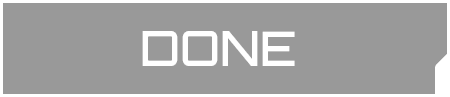
<style>
.page{position:relative;width:450px;height:97px;background:#999999}
.page>*{position:absolute;margin:0}
.t1{font:48px "Orbitron-Medium";color:#ffffff;text-transform:uppercase}
</style>
<div class="page">
<p class="t1" style="left:142px;top:31px;width:153px;height:35px">Done</p>
</div>
